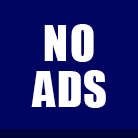
<style>
.page{position:relative;width:138px;height:138px;background:#000561}
.page>*{position:absolute;margin:0}
.t1{font:45.8px "Impact";letter-spacing:0.03em;color:#ffffff;text-transform:uppercase}
</style>
<div class="page">
<p class="t1" style="left:44px;top:24px;width:50px;height:38px">NO</p>
<p class="t1" style="left:31px;top:70px;width:75px;height:38px">ADS</p>
</div>
